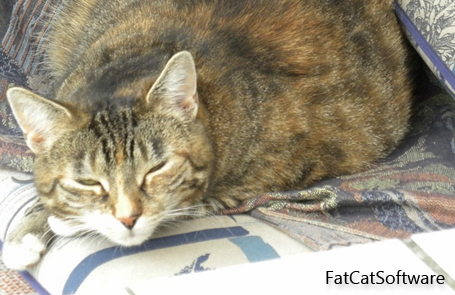
<style>
.page{position:relative;width:455px;height:295px}
.page>*{position:absolute;margin:0}
.t1{font:18px "SegoeUI";color:#000000}
</style>
<div class="page">
<p class="t1" style="left:326px;top:270px;width:119px;height:14px">FatCatSoftware</p>
</div>
